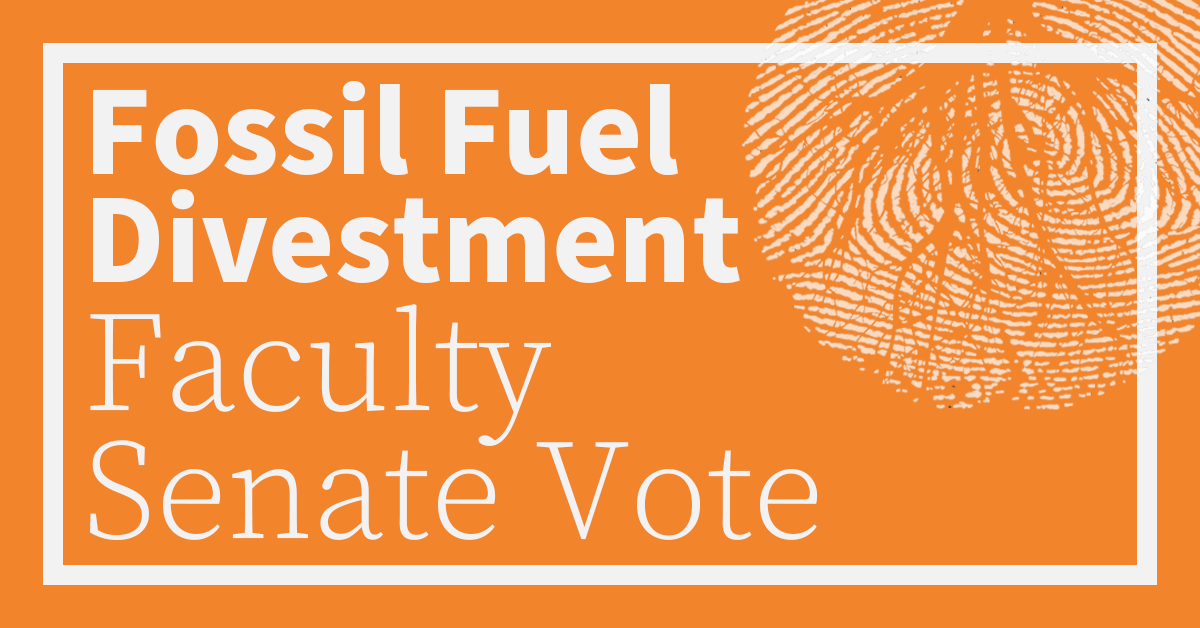
<style>
.page{position:relative;width:1200px;height:628px;background:#f2842c}
.page>*{position:absolute;margin:0}
.t1{font:128px/108px "SourceSansPro-Bold";color:#f2f2f2}
.t2{font:142px/128px "SourceSerifPro-Light";color:#f2f2f2}
</style>
<div class="page">
<p class="t1" style="left:89px;top:81px;width:729px;height:459px">Fossil Fuel <br>Divestment<br><span class="t2">Faculty<br>Senate Vote</span></p>
</div>
